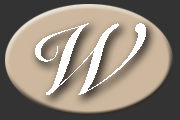
<style>
.page{position:relative;width:180px;height:120px;background:#333333}
.page>*{position:absolute;margin:0}
.t1{font:100px "SnellRoundhandW01-Bold";color:#ffffff}
</style>
<div class="page">
<p class="t1" style="left:35px;top:23px;width:111px;height:72px">W</p>
</div>
